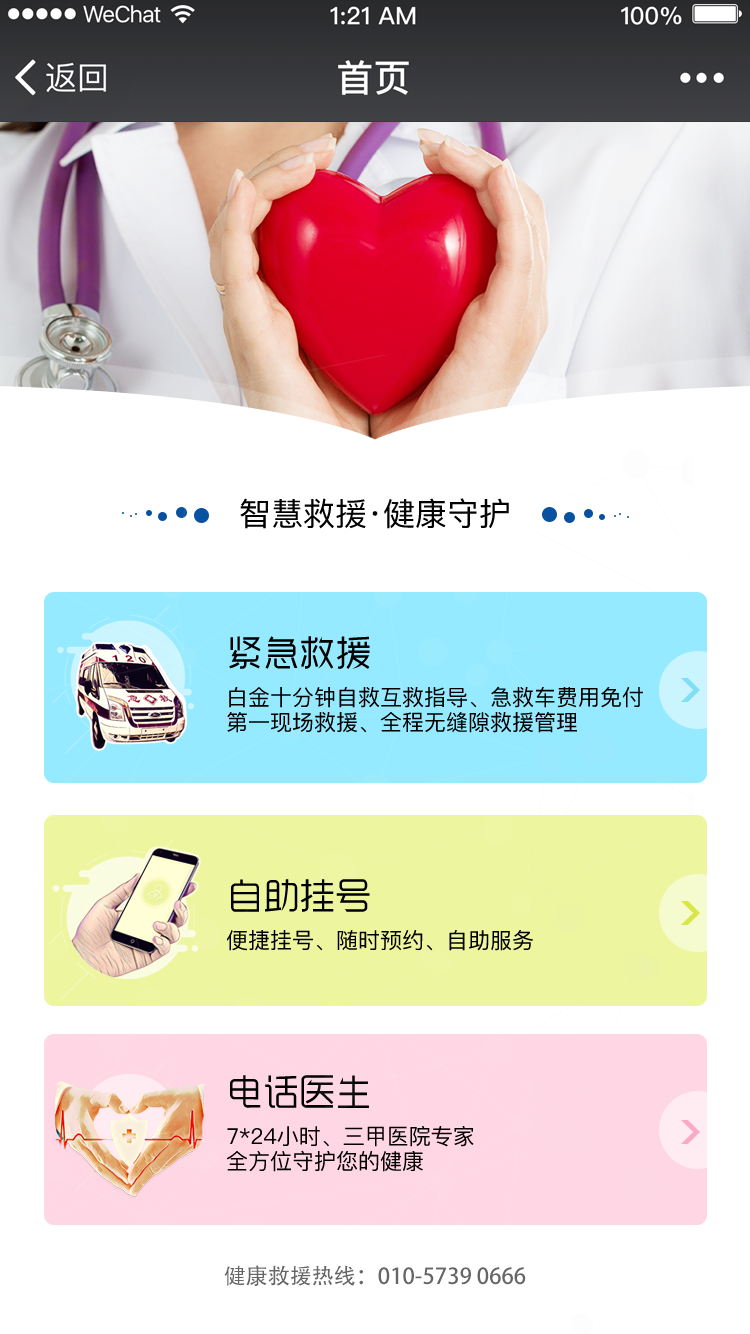
<style>
.page{position:relative;width:750px;height:1334px;background:#ffffff}
.page>*{position:absolute;margin:0}
.t1{font:32px "PingFang-SC-Medium";color:#000000}
.t2{font:22px/40px "PingFang-SC-Medium";color:#000000}
.t3{font:36px/40px "ZoomlaYasong-A001";color:#000000}
.t4{font:22px/25px "PingFang-SC-Medium";color:#000000}
.t5{font:22px "AdobeHeitiStd-Regular";color:#666666}
</style>
<div class="page">
<p class="t1" style="left:240px;top:498px;width:269px;height:31px">智慧救援·健康守护</p>
<p class="t2" style="left:227px;top:636px;width:416px;height:97px"><span class="t3">紧急救援<br></span>白金十分钟自救互救指导、急救车费用免付<br><span class="t4">第一现场救援、全程无缝隙救援管理</span></p>
<p class="t2" style="left:226px;top:879px;width:307px;height:72px"><span class="t3">自助挂号<br></span>便捷挂号、随时预约、自助服务</p>
<p class="t2" style="left:226px;top:1075px;width:248px;height:97px"><span class="t3">电话医生<br></span>7*24小时、三甲医院专家<br><span class="t4">全方位守护您的健康</span></p>
<p class="t5" style="left:224px;top:1265px;width:302px;height:22px">健康救援热线：010-5739 0666</p>
</div>
